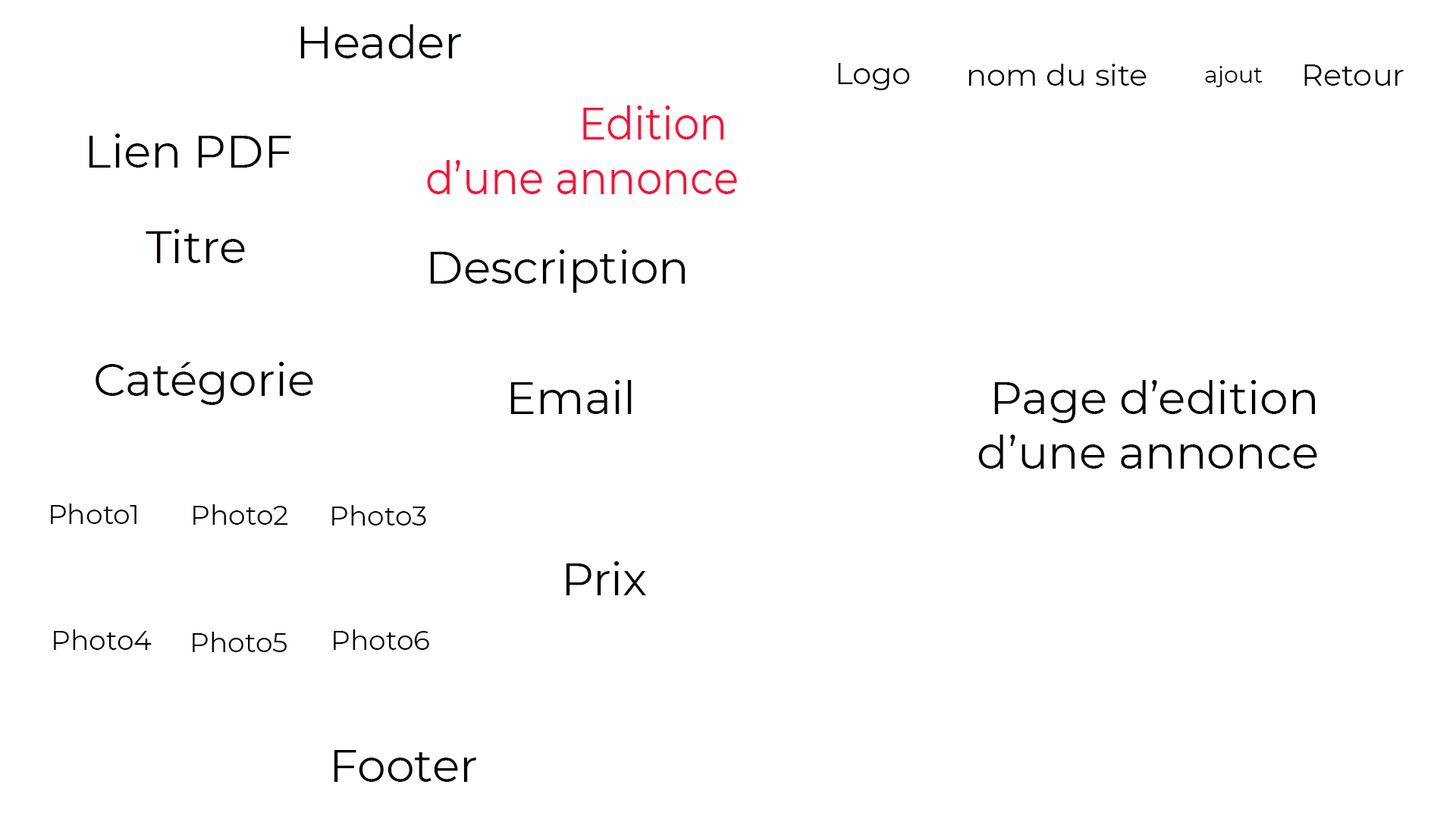
<style>
.page{position:relative;width:1456px;height:819px;background:#ffffff}
.page>*{position:absolute;margin:0}
.t1{font:45.5px "Montserrat-Regular";color:#000608}
.t2{font:30.3px "Montserrat-Regular";color:#080002}
.t3{font:22.7px "Montserrat-Regular";color:#010008}
.t4{font:45.5px "Montserrat-Regular";color:#fd0d35;scale:0.92 1}
.t5{font:45.5px "Montserrat-Regular";color:#080002}
.t6{font:45.5px "Montserrat-Regular";color:#010008}
.t7{font:27.3px "Montserrat-Regular";color:#080002}
.t8{font:27.3px "Montserrat-Regular";color:#010008}
</style>
<div class="page">
<p class="t1" style="left:300px;top:24px;width:161px;height:34px">Header</p>
<p class="t2" style="left:838px;top:63px;width:72px;height:27px">Logo</p>
<p class="t2" style="left:969px;top:64px;width:178px;height:22px">nom du site</p>
<p class="t3" style="left:1205px;top:66px;width:58px;height:21px">ajout</p>
<p class="t2" style="left:1304px;top:64px;width:100px;height:22px">Retour</p>
<p class="t4" style="left:427px;top:105px;width:310px;height:89px;text-align:right">Edition <br>d’une annonce</p>
<p class="t5" style="left:89px;top:133px;width:202px;height:35px">Lien PDF</p>
<p class="t5" style="left:146px;top:229px;width:99px;height:34px">Titre</p>
<p class="t5" style="left:430px;top:249px;width:255px;height:44px">Description</p>
<p class="t5" style="left:96px;top:362px;width:217px;height:43px">Catégorie</p>
<p class="t5" style="left:510px;top:380px;width:122px;height:34px">Email</p>
<p class="t6" style="left:978px;top:380px;width:339px;height:89px;text-align:right">Page d’edition <br>d’une annonce</p>
<p class="t7" style="left:51px;top:504px;width:85px;height:20px">Photo1</p>
<p class="t8" style="left:193px;top:504px;width:95px;height:21px">Photo2</p>
<p class="t8" style="left:332px;top:505px;width:94px;height:21px">Photo3</p>
<p class="t5" style="left:566px;top:561px;width:80px;height:34px">Prix</p>
<p class="t8" style="left:54px;top:629px;width:98px;height:21px">Photo4</p>
<p class="t8" style="left:334px;top:629px;width:95px;height:21px">Photo6</p>
<p class="t8" style="left:193px;top:632px;width:94px;height:20px">Photo5</p>
<p class="t5" style="left:334px;top:750px;width:142px;height:32px">Footer</p>
</div>
